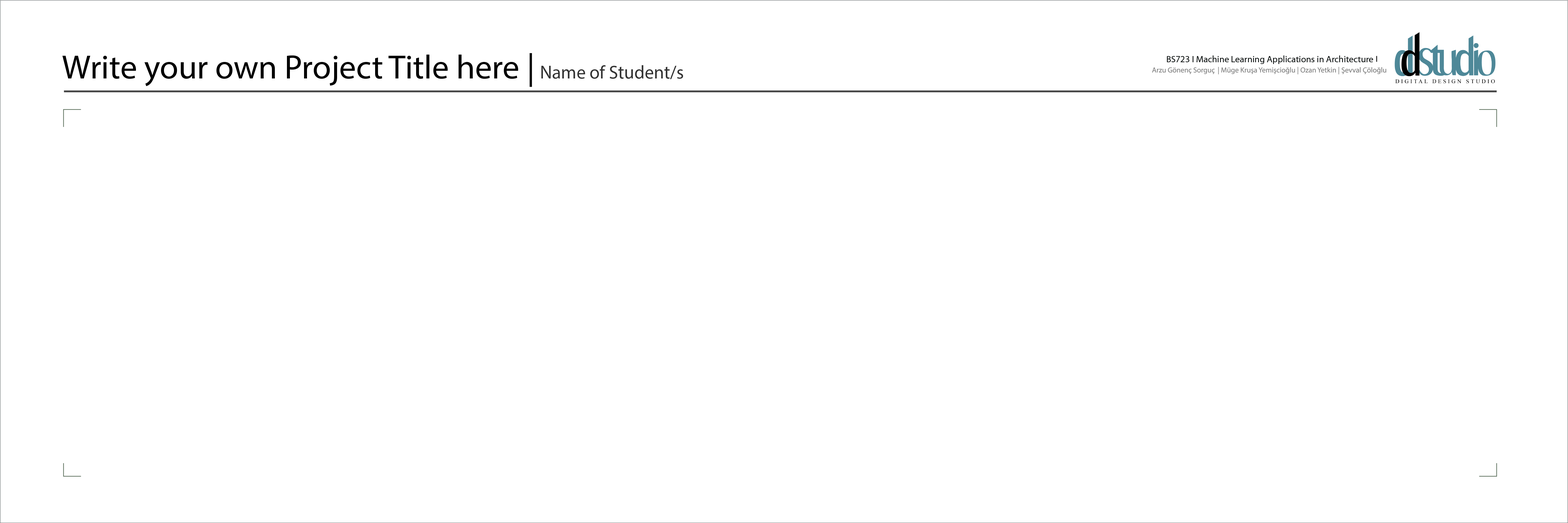
<style>
.page{position:relative;width:1568px;height:523px;background:#ffffff}
.page>*{position:absolute;margin:0}
.t1{font:33.8px "MyriadPro-Regular";color:#000000}
.t2{font:18.4px "MyriadPro-Regular";color:#333333}
.t3{font:9.2px "MyriadPro-Regular";color:#000000}
</style>
<div class="page">
<p class="t1" style="left:62px;top:53px;width:621px;height:34px">Write your own Project Title here | <span class="t2">Name of Student/s</span></p>
<p class="t3" style="left:1167px;top:55px;width:206px;height:9px">BS723 I Machine Learning Applications in Architecture</p>
</div>
